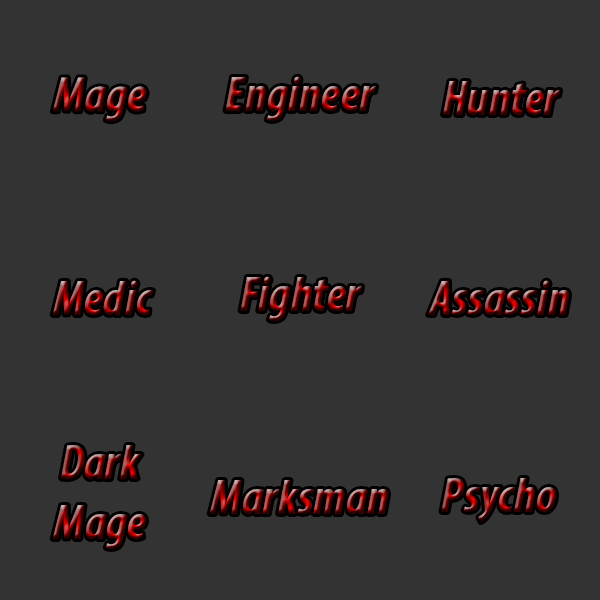
<style>
.page{position:relative;width:600px;height:600px;background:#333333}
.page>*{position:absolute;margin:0}
.t1{font:50px "MyriadPro-BoldCondIt"}
</style>
<div class="page">
<p class="t1" style="left:52px;top:77px;width:95px;height:45px">Mage</p>
<p class="t1" style="left:225px;top:76px;width:152px;height:45px">Engineer</p>
<p class="t1" style="left:443px;top:81px;width:118px;height:34px">Hunter</p>
<p class="t1" style="left:52px;top:280px;width:102px;height:35px">Medic</p>
<p class="t1" style="left:240px;top:276px;width:123px;height:45px">Fighter</p>
<p class="t1" style="left:428px;top:280px;width:141px;height:35px">Assassin</p>
<p class="t1" style="left:52px;top:445px;width:94px;height:104px;text-align:center">Dark<br>Mage</p>
<p class="t1" style="left:209px;top:480px;width:179px;height:34px">Marksman</p>
<p class="t1" style="left:441px;top:478px;width:115px;height:45px">Psycho</p>
</div>
